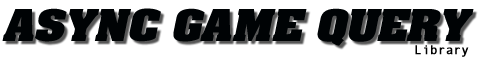
<style>
.page{position:relative;width:489px;height:60px;background:#ffffff}
.page>*{position:absolute;margin:0}
.t1{font:37.2px "AardvarkBold";color:#000305;font-style:italic;scale:1.15 1}
.t2{font:12.5px "AndaleMono";color:#000000;font-weight:bold}
</style>
<div class="page">
<p class="t1" style="left:2px;top:8px;width:472px;height:38px">ASYNC GAME QUERY</p>
<p class="t2" style="left:415px;top:45px;width:54px;height:12px">Library</p>
</div>
